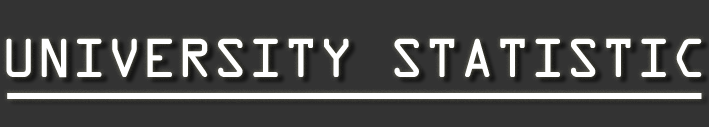
<style>
.page{position:relative;width:709px;height:127px;background:#333333}
.page>*{position:absolute;margin:0}
.t1{font:49px "OCRAStd";color:#ffffff}
</style>
<div class="page">
<p class="t1" style="left:6px;top:38px;width:696px;height:40px">UNIVERSITY STATISTIC</p>
</div>
